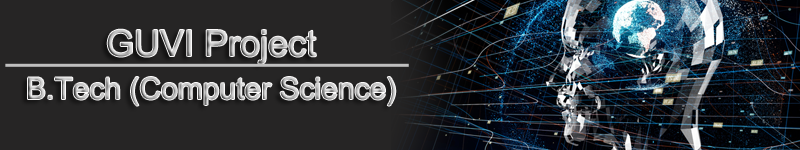
<style>
.page{position:relative;width:800px;height:150px;background:#262525}
.page>*{position:absolute;margin:0}
.t1{font:36px "ArialMT"}
.t2{font:30px "ArialMT";color:#bfbfbf}
</style>
<div class="page">
<p class="t1" style="left:107px;top:29px;width:209px;height:35px">GUVI Project</p>
<p class="t2" style="left:28px;top:77px;width:368px;height:29px">B.Tech (Computer Science)</p>
</div>
